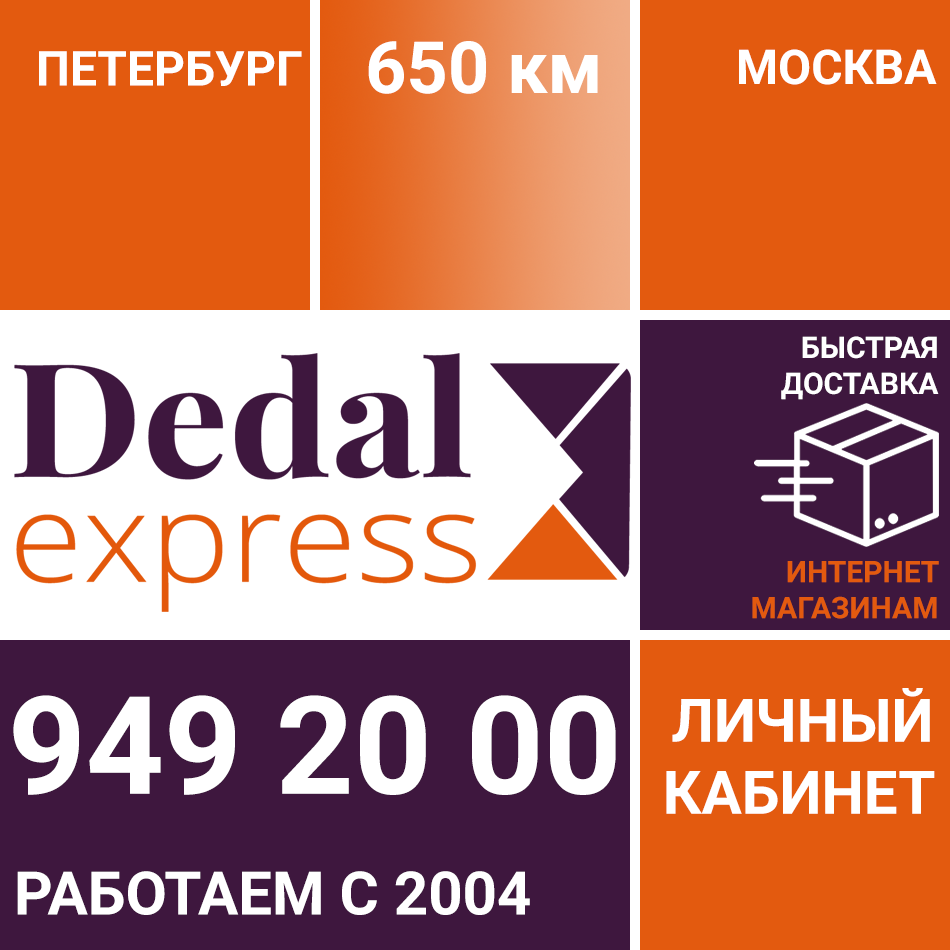
<style>
.page{position:relative;width:950px;height:950px;background:#e35a0f}
.page>*{position:absolute;margin:0}
.t1{font:72px "Roboto-Bold";color:#ffffff}
.t2{font:48px "Roboto-Bold";color:#ffffff}
.t3{font:30px "Roboto-Bold";color:#ffffff}
.t4{font:30px "Roboto-Bold";color:#e35a0f}
.t5{font:60px "Roboto-Bold";color:#ffffff}
.t6{font:136px "Roboto-Bold";color:#ffffff}
</style>
<div class="page">
<p class="t1" style="left:368px;top:41px;width:230px;height:53px">650 км</p>
<p class="t2" style="left:39px;top:51px;width:263px;height:35px">ПЕТЕРБУРГ</p>
<p class="t2" style="left:739px;top:49px;width:198px;height:36px">МОСКВА</p>
<p class="t3" style="left:781px;top:336px;width:158px;height:64px;text-align:right">БЫСТРАЯ<br>ДОСТАВКА</p>
<p class="t4" style="left:752px;top:561px;width:187px;height:58px;text-align:right">ИНТЕРНЕТ<br>МАГАЗИНАМ</p>
<p class="t5" style="left:666px;top:688px;width:269px;height:126px;text-align:right">ЛИЧНЫЙ<br>КАБИНЕТ</p>
<p class="t6" style="left:13px;top:695px;width:603px;height:100px">949 20 00</p>
<p class="t5" style="left:17px;top:871px;width:513px;height:44px">РАБОТАЕМ С 2004</p>
</div>
